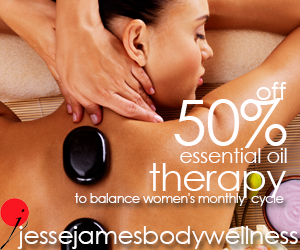
<style>
.page{position:relative;width:300px;height:250px}
.page>*{position:absolute;margin:0}
.t1{font:25px "CenturyGothic";letter-spacing:-0.02em;color:#fffdfd}
.t2{font:62.5px "CenturyGothic";letter-spacing:-0.02em;color:#fffdfd}
.t3{font:20.8px "CenturyGothic";letter-spacing:-0.02em;color:#fffdfd}
.t4{font:37.5px "CenturyGothic";letter-spacing:-0.02em;color:#fffdfd}
.t5{font:12.5px "CenturyGothic";letter-spacing:-0.02em;color:#fffdfd}
</style>
<div class="page">
<p class="t1" style="left:256px;top:82px;width:30px;height:18px">off</p>
<p class="t2" style="left:174px;top:98px;width:113px;height:50px">50%</p>
<p class="t3" style="left:180px;top:148px;width:107px;height:15px">essential oil</p>
<p class="t4" style="left:149px;top:163px;width:137px;height:35px">therapy</p>
<p class="t5" style="left:74px;top:193px;width:210px;height:13px">to balance women's monthly  cycle</p>
<p class="t1" style="left:17px;top:226px;width:281px;height:23px">jessejamesbodywellness</p>
</div>
